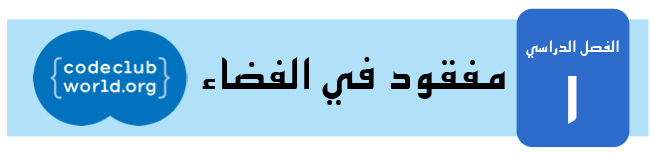
<style>
.page{position:relative;width:655px;height:153px;background:#b0e1f9}
.page>*{position:absolute;margin:0}
.t1{font:18px "KufiStandardGK";color:#ffffff}
.t2{font:48px "KufiStandardGK";color:#000000}
.t3{font:72px "KufiStandardGK";color:#ffffff}
</style>
<div class="page">
<p class="t1" style="left:526px;top:40px;width:93px;height:18px">الفصل الدراسي</p>
<p class="t2" style="left:202px;top:57px;width:303px;height:48px">مفقود في الفضاء</p>
<p class="t3" style="left:568px;top:76px;width:9px;height:48px">١</p>
</div>
